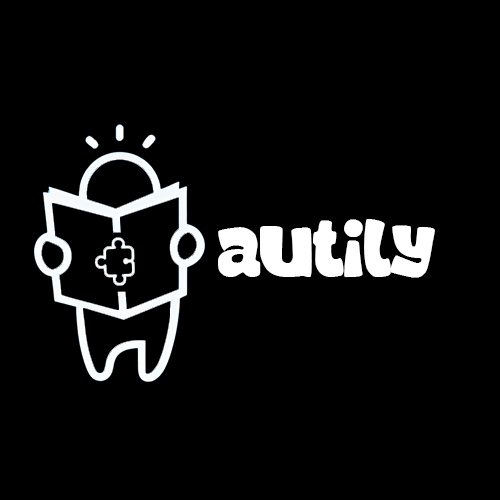
<style>
.page{position:relative;width:500px;height:500px;background:#000000}
.page>*{position:absolute;margin:0}
.t1{font:72.2px "DaddyCartoon";color:#ffffff}
</style>
<div class="page">
<p class="t1" style="left:218px;top:219px;width:217px;height:59px">AUTILY</p>
</div>
